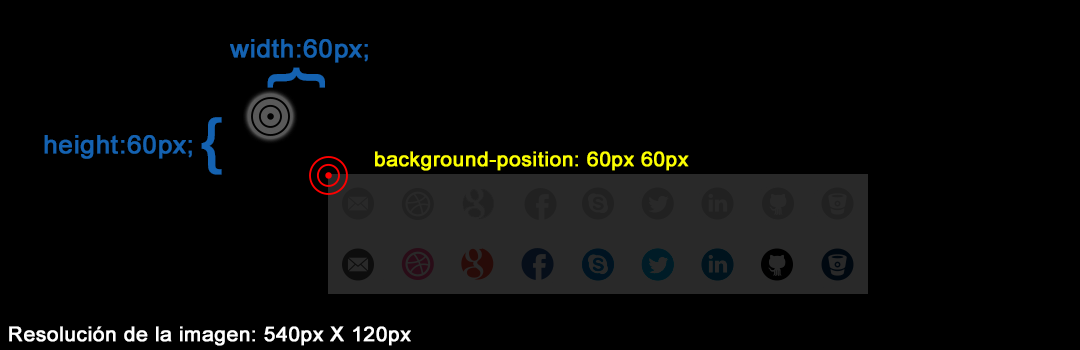
<style>
.page{position:relative;width:1080px;height:350px;background:#000000}
.page>*{position:absolute;margin:0}
.t1{font:25px "ArialMT";letter-spacing:0.01em;color:#1462b1;font-weight:bold;scale:1.03 1}
.t2{font:60px "ArialMT";letter-spacing:0.01em;color:#1462b1;font-weight:bold}
.t3{font:20px "ArialMT";letter-spacing:0.01em;color:#fcff00;font-weight:bold;scale:1.03 1}
.t4{font:20px "ArialMT";letter-spacing:0.01em;color:#ffffff;font-weight:bold;scale:1.03 1}
</style>
<div class="page">
<p class="t1" style="left:230px;top:39px;width:138px;height:24px">width:60px;</p>
<p class="t2" style="left:267px;top:67px;width:58px;height:21px;rotate:90deg">{</p>
<p class="t2" style="left:201px;top:117px;width:21px;height:58px">{</p>
<p class="t1" style="left:44px;top:135px;width:148px;height:24px">height:60px;</p>
<p class="t3" style="left:375px;top:151px;width:314px;height:20px">background-position: 60px 60px</p>
<p class="t4" style="left:9px;top:326px;width:402px;height:20px">Resolución de la imagen: 540px X 120px</p>
</div>
